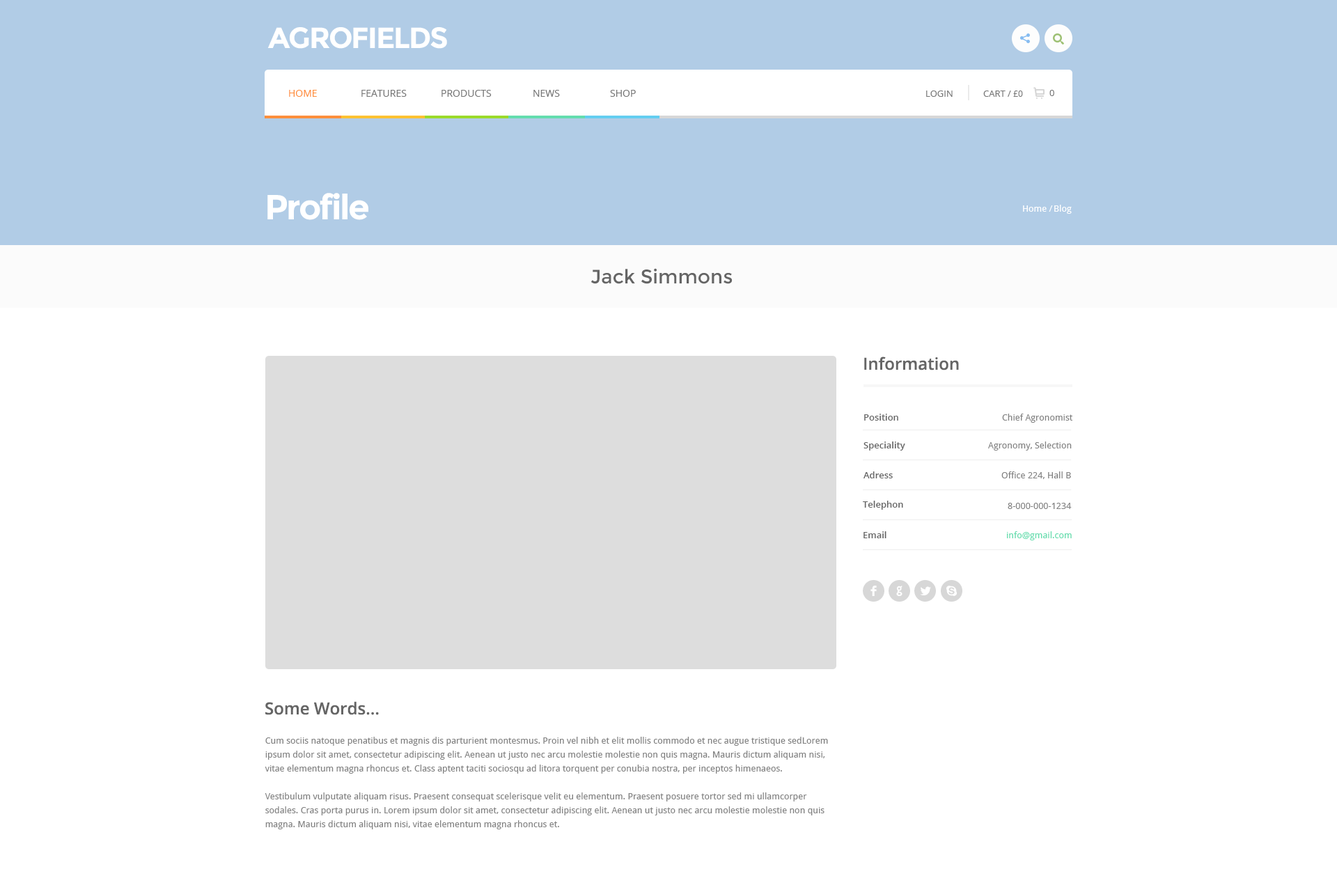
<style>
.page{position:relative;width:1337px;height:892px;background:#ffffff}
.page>*{position:absolute;margin:0}
.t1{font:29.2px "Montserrat-Bold";letter-spacing:-0.05em;color:#ffffff;text-transform:uppercase}
.t2{font:9.7px "OpenSans";color:#ff8f3c;text-transform:uppercase}
.t3{font:9.7px "OpenSans";color:#767676;text-transform:uppercase}
.t4{font:9.1px "OpenSans";color:#767676;text-transform:uppercase}
.t5{font:8.4px "OpenSans";color:#767676;text-transform:uppercase}
.t6{font:34.8px "Montserrat-Bold";letter-spacing:-0.05em;color:#ffffff}
.t7{font:9.1px "DroidSans";color:#ffffff}
.t8{font:19.5px "Montserrat-Regular";color:#656565}
.t9{font:16.7px "OpenSans-Semibold";color:#656565}
.t10{font:9.1px "OpenSans-Semibold";color:#656565}
.t11{font:9.1px "DroidSans";color:#838383}
.t12{font:9.1px "DroidSans";color:#64ddae}
.t13{font:30.6px "Socialico";letter-spacing:0.05em;color:#d7d7d7}
.t14{font:9.1px/13.9px "DroidSans";color:#838383}
</style>
<div class="page">
<p class="t1" style="left:267px;top:27px;width:180px;height:22px">Agrofields</p>
<p class="t2" style="left:289px;top:90px;width:28px;height:7px">Home</p>
<p class="t3" style="left:361px;top:90px;width:46px;height:7px">Features</p>
<p class="t3" style="left:441px;top:90px;width:51px;height:7px">Products</p>
<p class="t3" style="left:533px;top:90px;width:27px;height:7px">News</p>
<p class="t3" style="left:610px;top:90px;width:26px;height:7px">Shop</p>
<p class="t4" style="left:1049px;top:90px;width:5px;height:6px">0</p>
<p class="t4" style="left:926px;top:91px;width:27px;height:6px">Login</p>
<p class="t4" style="left:983px;top:91px;width:40px;height:6px">cart / <span class="t5">£0</span></p>
<p class="t6" style="left:267px;top:193px;width:101px;height:27px">Profile</p>
<p class="t7" style="left:1023px;top:205px;width:30px;height:7px">Home /</p>
<p class="t7" style="left:1054px;top:205px;width:18px;height:9px">Blog</p>
<p class="t8" style="left:590px;top:268px;width:142px;height:16px">Jack Simmons</p>
<p class="t9" style="left:864px;top:357px;width:95px;height:13px">Information</p>
<p class="t10" style="left:864px;top:414px;width:34px;height:7px">Position</p>
<p class="t11" style="left:1002px;top:414px;width:70px;height:9px">Chief Agronomist</p>
<p class="t10" style="left:863px;top:441px;width:42px;height:10px">Speciality</p>
<p class="t11" style="left:988px;top:441px;width:84px;height:10px">Agronomy, Selection</p>
<p class="t10" style="left:863px;top:471px;width:30px;height:7px">Adress</p>
<p class="t11" style="left:1001px;top:471px;width:70px;height:8px">Office 224, Hall B</p>
<p class="t10" style="left:863px;top:501px;width:40px;height:9px">Telephon</p>
<p class="t11" style="left:1008px;top:503px;width:64px;height:6px">8-000-000-1234</p>
<p class="t10" style="left:863px;top:531px;width:23px;height:7px">Email</p>
<p class="t12" style="left:1007px;top:531px;width:65px;height:9px">info@gmail.com</p>
<p class="t13" style="left:863px;top:580px;width:99px;height:22px">fglh</p>
<p class="t9" style="left:265px;top:701px;width:114px;height:14px">Some Words...</p>
<p class="t14" style="left:265px;top:737px;width:563px;height:92px">Cum sociis natoque penatibus et magnis dis parturient montesmus. Proin vel nibh et elit mollis commodo et nec augue tristique sedLorem ipsum dolor sit amet, consectetur adipiscing elit. Aenean ut justo nec arcu molestie molestie non quis magna. Mauris dictum aliquam nisi, vitae elementum magna rhoncus et. Class aptent taciti sociosqu ad litora torquent per conubia nostra, per inceptos himenaeos.<br><br>Vestibulum vulputate aliquam risus. Praesent consequat scelerisque velit eu elementum. Praesent posuere tortor sed mi ullamcorper sodales. Cras porta purus in. Lorem ipsum dolor sit amet, consectetur adipiscing elit. Aenean ut justo nec arcu molestie molestie non quis magna. Mauris dictum aliquam nisi, vitae elementum magna rhoncus et.</p>
</div>
